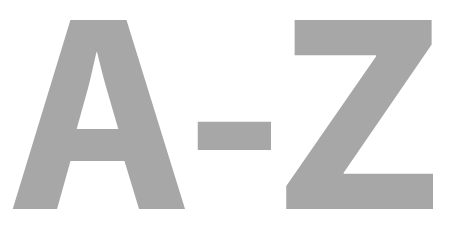
<style>
.page{position:relative;width:450px;height:230px;background:#ffffff}
.page>*{position:absolute;margin:0}
.t1{font:280px "MyriadPro-Bold";color:#a7a7a7}
</style>
<div class="page">
<p class="t1" style="left:12px;top:20px;width:421px;height:189px">A-Z</p>
</div>
